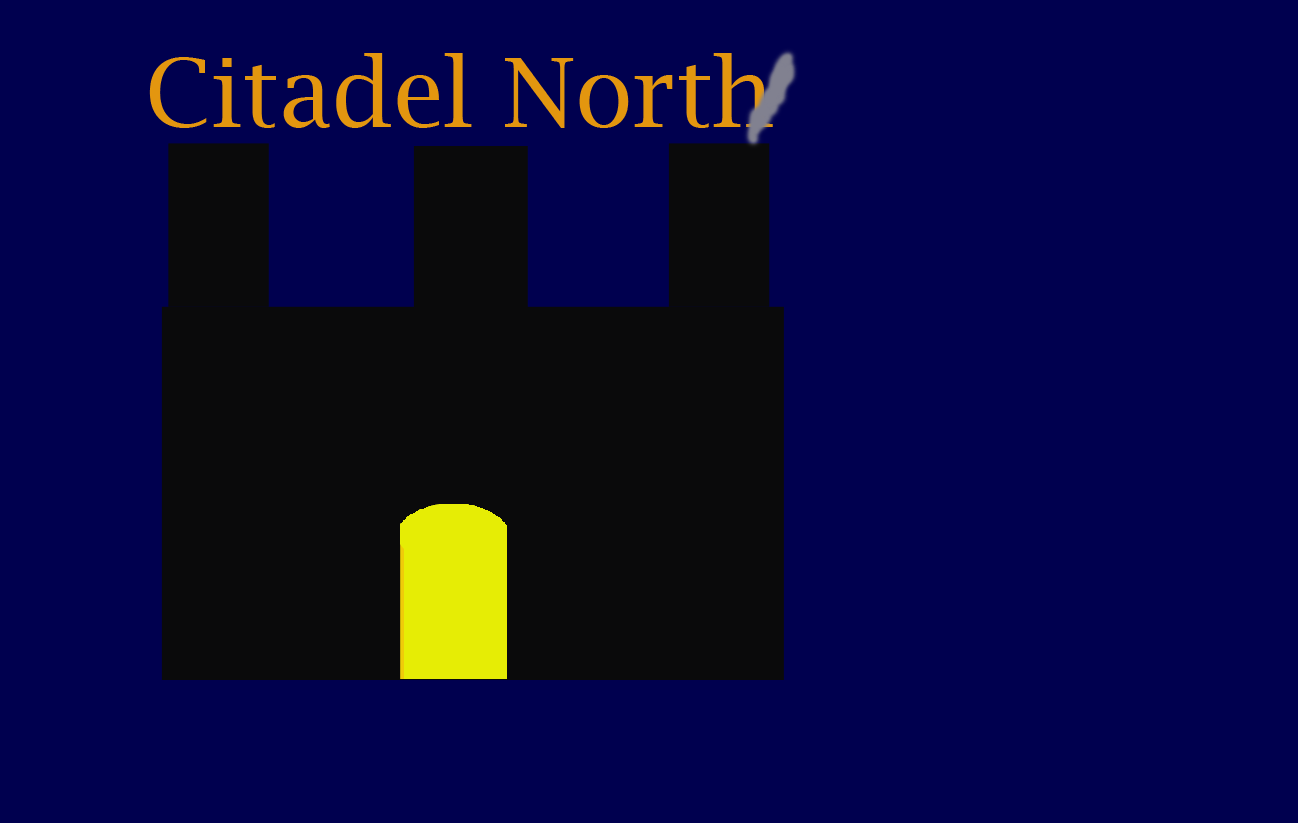
<style>
.page{position:relative;width:1298px;height:823px;background:#00004f}
.page>*{position:absolute;margin:0}
.t1{font:96px "LucidaBright";color:#e3960f}
</style>
<div class="page">
<p class="t1" style="left:149px;top:53px;width:624px;height:75px">Citadel North</p>
</div>
